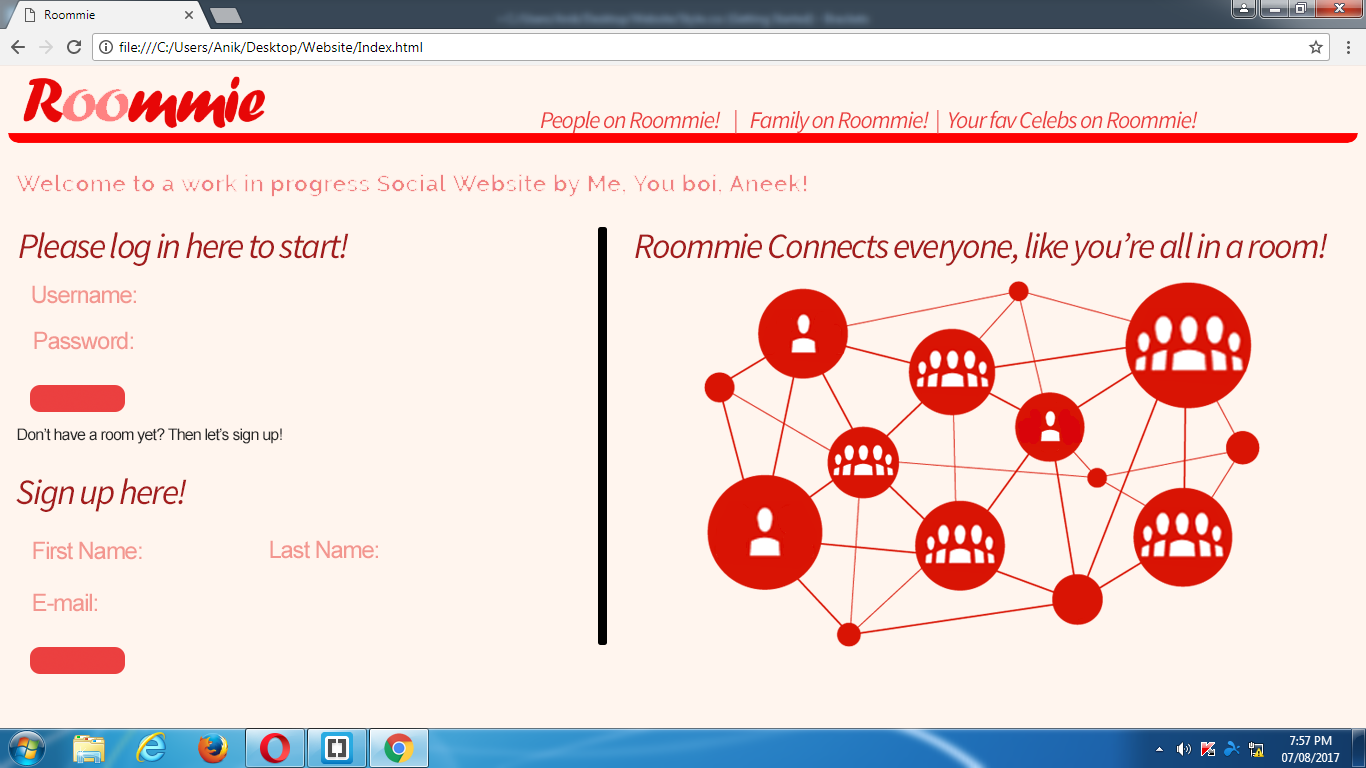
<style>
.page{position:relative;width:1366px;height:768px;background:#fff5ee}
.page>*{position:absolute;margin:0}
.t1{font:24px "SourceSansPro-It";letter-spacing:-0.05em;color:#eb4040}
.t2{font:36px "SourceSansPro-It";letter-spacing:-0.05em;color:#a31c1c}
.t3{font:24px "ArialMT";letter-spacing:-0.05em;color:#f3968f}
.t4{font:16px "ArialMT";letter-spacing:-0.05em;color:#282828}
</style>
<div class="page">
<p class="t1" style="left:540px;top:110px;width:197px;height:24px">People on Roommie!    |</p>
<p class="t1" style="left:750px;top:110px;width:189px;height:24px">Family on Roommie!  |</p>
<p class="t1" style="left:949px;top:110px;width:249px;height:19px">Your fav Celebs on Roommie!</p>
<p class="t2" style="left:19px;top:232px;width:330px;height:34px">Please log in here to start!</p>
<p class="t2" style="left:635px;top:232px;width:693px;height:34px">Roommie Connects everyone, like you’re all in a room!</p>
<p class="t3" style="left:32px;top:285px;width:104px;height:19px">Username:</p>
<p class="t3" style="left:34px;top:331px;width:99px;height:19px">Password:</p>
<p class="t4" style="left:17px;top:428px;width:265px;height:16px">Don’t have a room yet? Then let’s sign up!</p>
<p class="t2" style="left:16px;top:478px;width:171px;height:34px">Sign up here!</p>
<p class="t3" style="left:33px;top:541px;width:109px;height:19px">First Name:</p>
<p class="t3" style="left:270px;top:540px;width:108px;height:19px">Last Name:</p>
<p class="t3" style="left:33px;top:593px;width:64px;height:19px">E-mail:</p>
</div>
